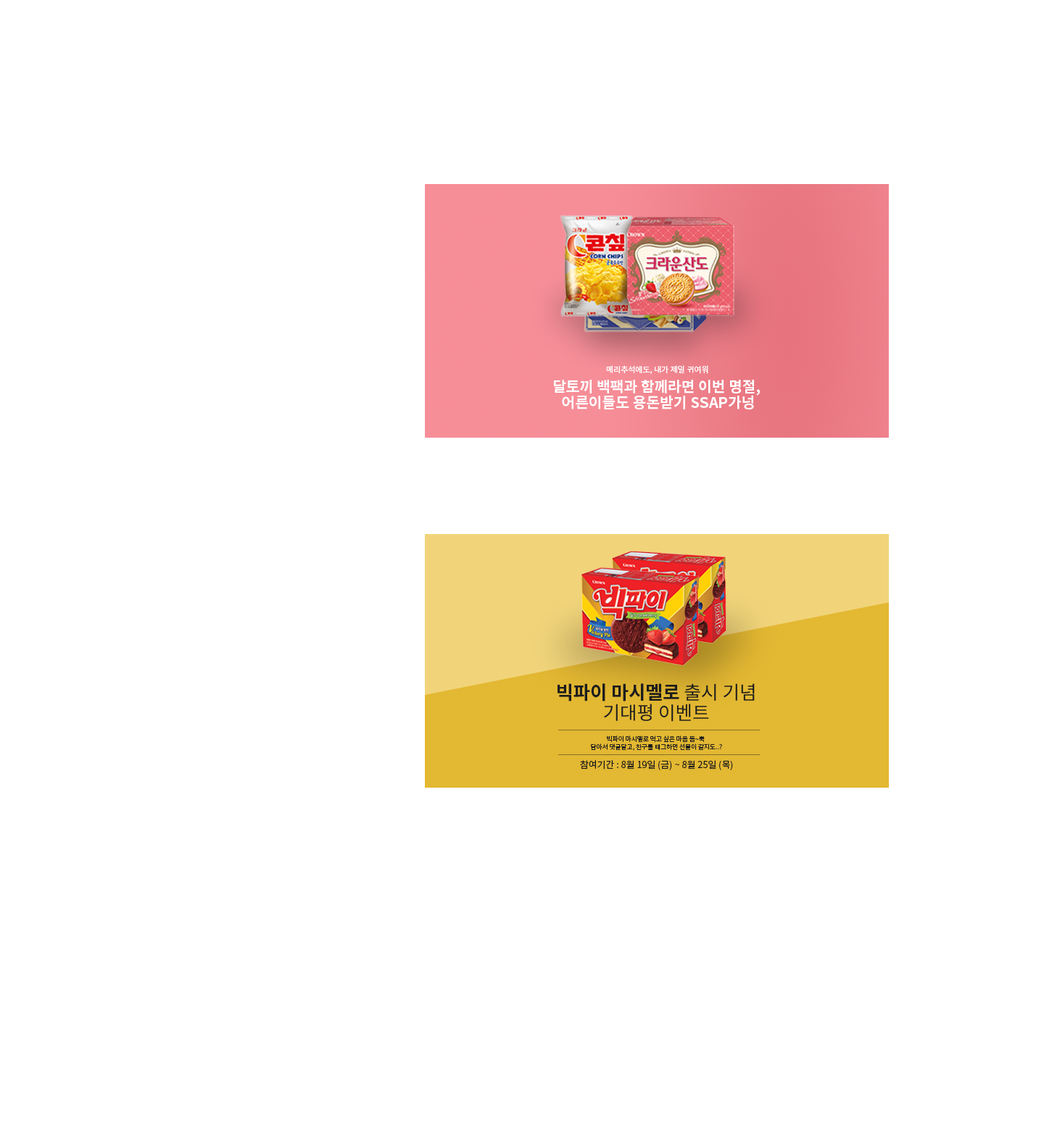
<style>
.page{position:relative;width:1044px;height:1142px;background:#ffffff}
.page>*{position:absolute;margin:0}
.t1{font:8px "NotoSansKR-Regular";color:#ffffff}
.t2{font:14.7px/16.2px "NotoSansKR-Bold";color:#ffffff}
.t3{font:18.6px/20.4px "NotoSansKR-Regular";color:#1d1d1d}
.t4{font:18.6px/20.4px "NotoSansKR-Bold";color:#1d1d1d}
.t5{font:6.3px "NotoSansKR-Regular";color:#1d1d1d}
.t6{font:9.3px "NotoSansKR-Regular";color:#1d1d1d}
</style>
<div class="page">
<p class="t1" style="left:606px;top:365px;width:102px;height:9px">메리추석에도, 내가 제일 귀여워</p>
<p class="t2" style="left:554px;top:380px;width:206px;height:30px;text-align:center">달토끼 백팩과 함께라면 이번 명절, <br>어른이들도 용돈받기 SSAP가넝</p>
<p class="t3" style="left:557px;top:684px;width:198px;height:38px;text-align:center"><span class="t4">빅파이 마시멜로 </span>출시 기념<br>기대평 이벤트</p>
<p class="t5" style="left:591px;top:736px;width:131px;height:15px;text-align:center">빅파이 마시멜로 먹고 싶은 마음 듬~뿍 <br>담아서 댓글달고, 친구를 태그하면 선물이 갈지도..?</p>
<p class="t6" style="left:580px;top:760px;width:153px;height:11px">참여기간 : 8월 19일 (금) ~ 8월 25일 (목)</p>
</div>
